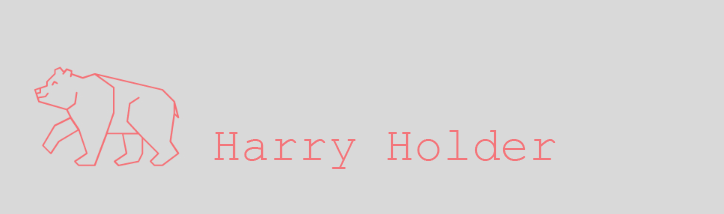
<style>
.page{position:relative;width:724px;height:214px;background:#d9d9d9}
.page>*{position:absolute;margin:0}
.t1{font:48px "CourierNewPSMT";color:#f3767b}
</style>
<div class="page">
<p class="t1" style="left:214px;top:130px;width:342px;height:39px">Harry Holder</p>
</div>
